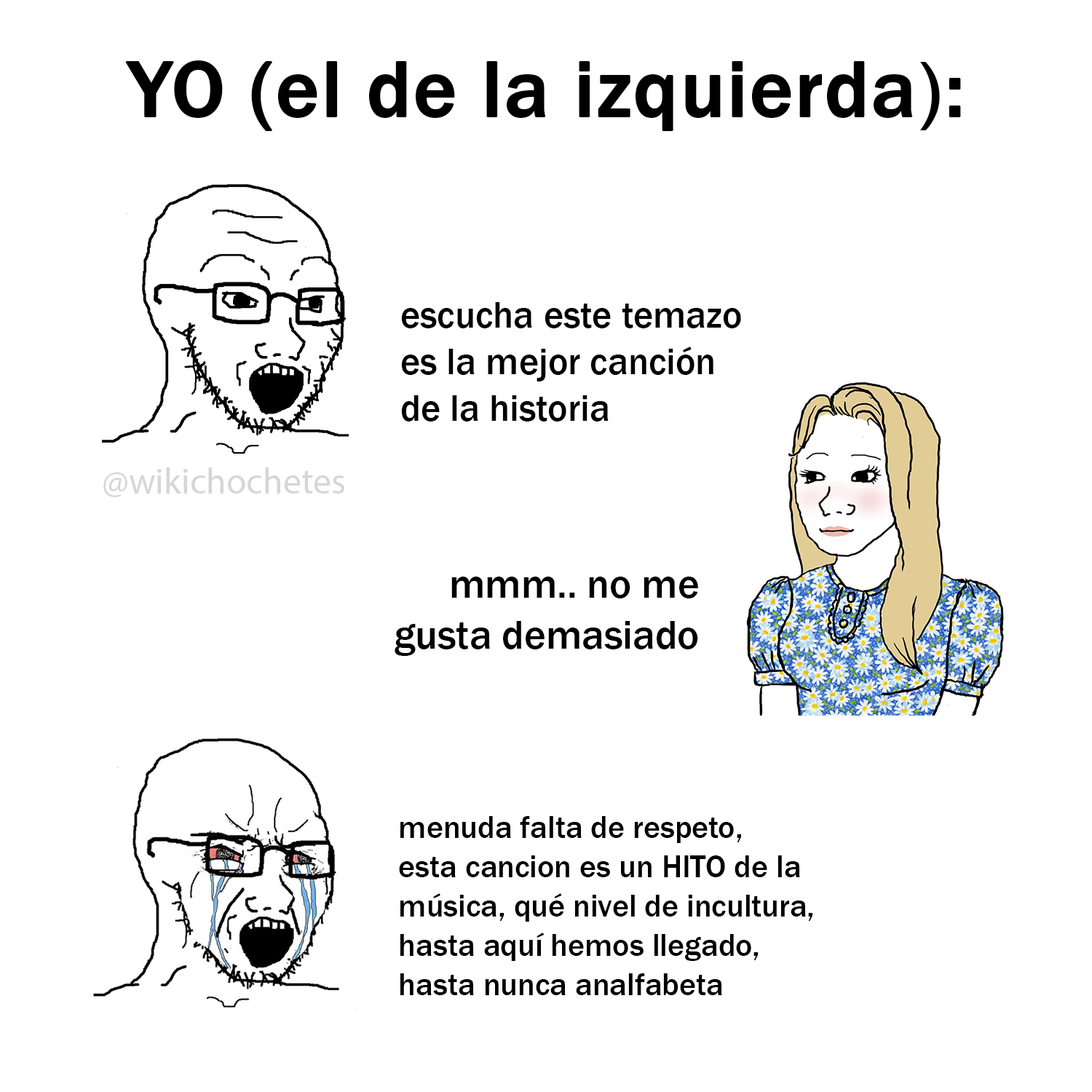
<style>
.page{position:relative;width:1092px;height:1092px;background:#ffffff}
.page>*{position:absolute;margin:0}
.t1{font:82.6px "FranklinGothic-Medium";color:#000000;font-weight:bold}
.t2{font:37.9px "FranklinGothic-Medium";color:#000000}
.t3{font:36.3px "MyriadPro-Regular";color:#d6d6d6}
.t4{font:41.3px "FranklinGothic-Medium";color:#000000}
.t5{font:31.9px "FranklinGothic-Medium";color:#000000}
</style>
<div class="page">
<p class="t1" style="left:125px;top:60px;width:836px;height:72px">YO (el de la izquierda):</p>
<p class="t2" style="left:401px;top:302px;width:340px;height:120px">escucha este temazo<br>es la mejor canción<br>de la historia</p>
<p class="t3" style="left:103px;top:467px;width:241px;height:30px">@wikichochetes</p>
<p class="t4" style="left:395px;top:577px;width:303px;height:79px;text-align:right">mmm.. no me<br>gusta demasiado</p>
<p class="t5" style="left:399px;top:816px;width:413px;height:179px">menuda falta de respeto,<br>esta cancion es un HITO de la<br>música, qué nivel de incultura,<br>hasta aquí hemos llegado,<br>hasta nunca analfabeta</p>
</div>
